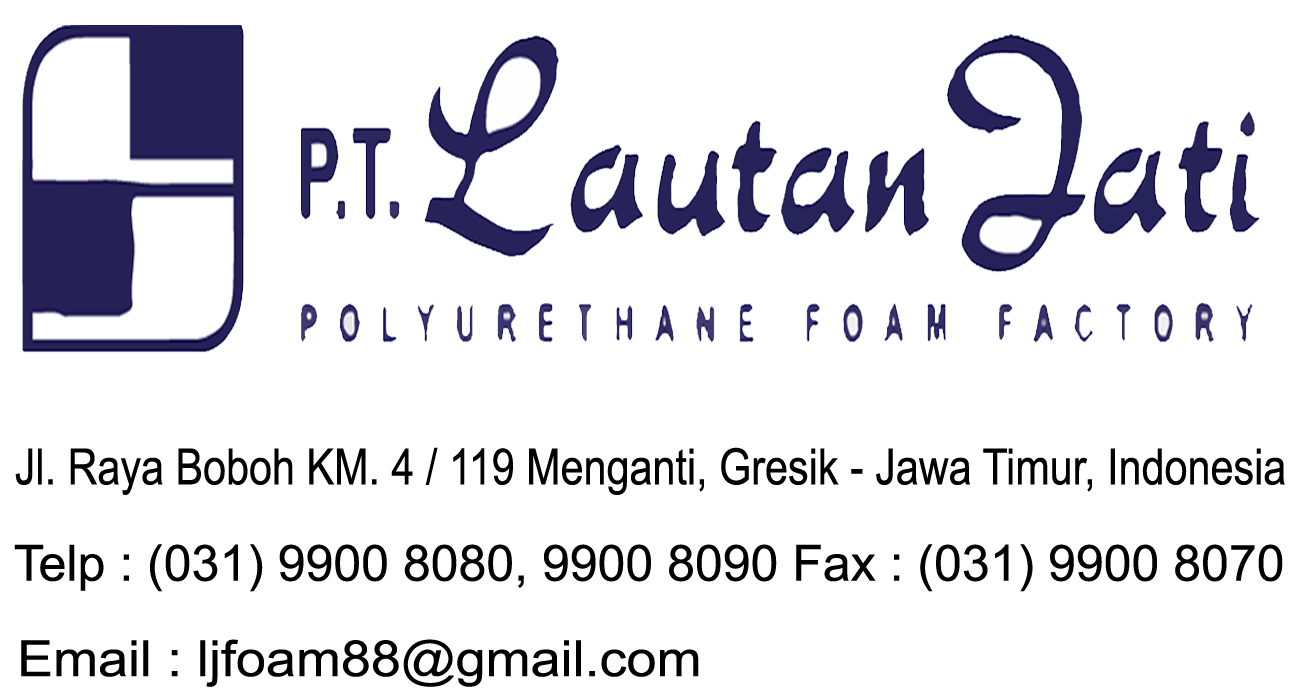
<style>
.page{position:relative;width:1300px;height:700px;background:#ffffff}
.page>*{position:absolute;margin:0}
.t1{font:50px "ArialMT";color:#000000;scale:0.83 1}
.t2{font:50px "ArialMT";color:#000000}
.t3{font:50px "ArialMT";color:#000000;scale:1.08 1}
</style>
<div class="page">
<p class="t1" style="left:15px;top:447px;width:1270px;height:48px">Jl. Raya Boboh KM. 4 / 119 Menganti, Gresik - Jawa Timur, Indonesia</p>
<p class="t2" style="left:14px;top:544px;width:1269px;height:48px">Telp : (031) 9900 8080, 9900 8090 Fax : (031) 9900 8070</p>
<p class="t3" style="left:21px;top:639px;width:678px;height:48px">Email : ljfoam88@gmail.com</p>
</div>
